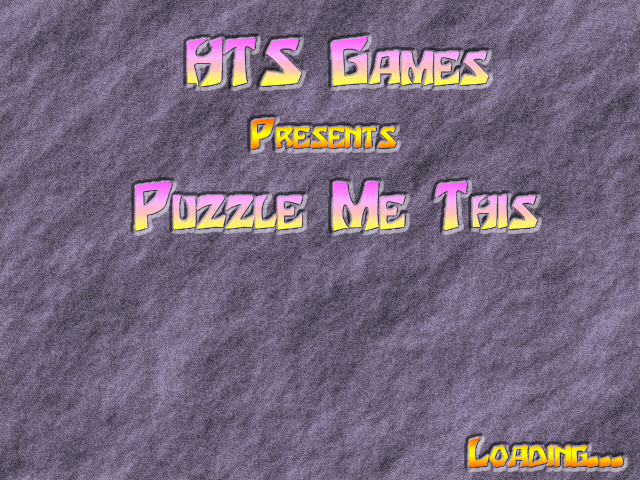
<style>
.page{position:relative;width:640px;height:480px}
.page>*{position:absolute;margin:0}
.t1{font:54px "Houters-Normal";font-variant:small-caps;font-weight:bold}
.t2{font:34px "Houters-Normal";font-variant:small-caps;font-weight:bold}
</style>
<div class="page">
<p class="t1" style="left:187px;top:36px;width:302px;height:52px">HTS Games</p>
<p class="t2" style="left:251px;top:118px;width:146px;height:32px">Presents</p>
<p class="t1" style="left:135px;top:182px;width:403px;height:49px">Puzzle Me This</p>
<p class="t2" style="left:469px;top:438px;width:154px;height:30px">Loading...</p>
</div>
